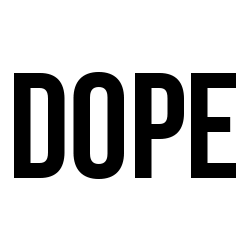
<style>
.page{position:relative;width:250px;height:250px;background:#ffffff}
.page>*{position:absolute;margin:0}
.t1{font:150px "BebasNeueBold";color:#000000}
</style>
<div class="page">
<p class="t1" style="left:14px;top:72px;width:222px;height:107px">dope</p>
</div>
